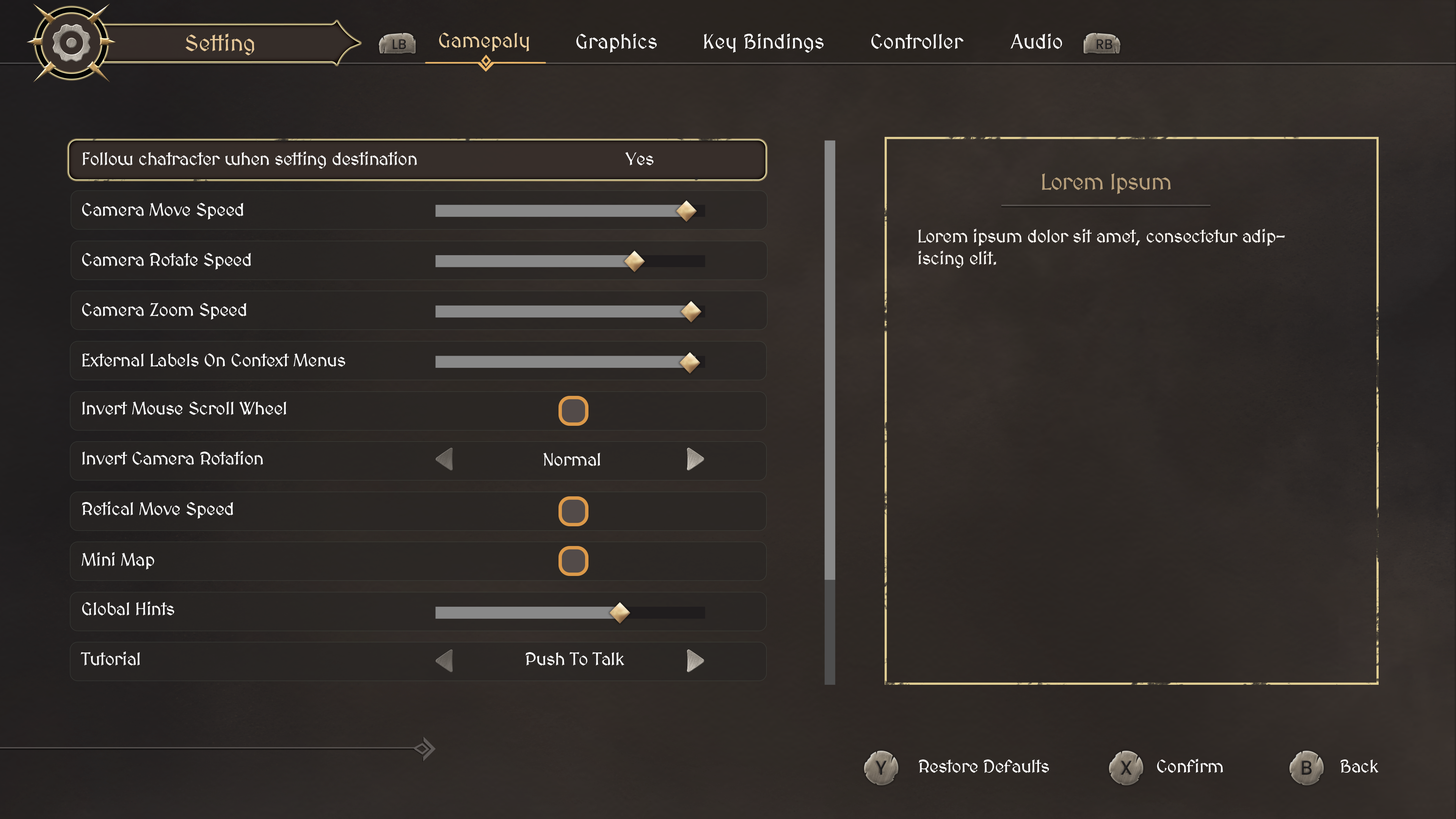
<style>
.page{position:relative;width:1456px;height:819px}
.page>*{position:absolute;margin:0}
.t1{font:22.7px "MedievalSharp";color:#e6c899}
.t2{font:20.5px "MedievalSharp";color:#eccf9f}
.t3{font:20.5px "MedievalSharp";color:#ffffff}
.t4{font:18.2px "MedievalSharp";letter-spacing:-0.02em;color:#ffffff}
.t5{font:22.7px "MedievalSharp";letter-spacing:-0.02em;color:#b79f7b}
.t6{font:18.2px "MedievalSharp";letter-spacing:-0.02em;color:#fffbf5}
</style>
<div class="page">
<p class="t1" style="left:185px;top:33px;width:69px;height:22px">Setting</p>
<p class="t2" style="left:439px;top:33px;width:90px;height:19px">Gamepaly</p>
<p class="t3" style="left:576px;top:33px;width:81px;height:20px">Graphics</p>
<p class="t3" style="left:704px;top:33px;width:120px;height:20px">Key Bindings</p>
<p class="t3" style="left:871px;top:34px;width:93px;height:15px">Controller</p>
<p class="t3" style="left:1010px;top:33px;width:52px;height:16px">Audio</p>
<p class="t4" style="left:83px;top:151px;width:334px;height:18px">Follow chatracter when setting destination</p>
<p class="t4" style="left:625px;top:152px;width:29px;height:13px">Yes</p>
<p class="t5" style="left:1042px;top:173px;width:129px;height:21px">Lorem Ipsum</p>
<p class="t4" style="left:82px;top:203px;width:161px;height:17px">Camera Move Speed</p>
<p class="t6" style="left:918px;top:229px;width:367px;height:39px">Lorem ipsum dolor sit amet, consectetur adipiscing elit.</p>
<p class="t4" style="left:82px;top:253px;width:169px;height:17px">Camera Rotate Speed</p>
<p class="t4" style="left:82px;top:303px;width:164px;height:17px">Camera Zoom Speed</p>
<p class="t4" style="left:82px;top:353px;width:263px;height:14px">External Labels On Context Menus</p>
<p class="t4" style="left:82px;top:402px;width:204px;height:13px">Invert Mouse Scroll Wheel</p>
<p class="t4" style="left:82px;top:451px;width:181px;height:14px">Invert Camera Rotation</p>
<p class="t4" style="left:543px;top:453px;width:57px;height:13px">Normal</p>
<p class="t4" style="left:82px;top:501px;width:151px;height:18px">Retical Move Speed</p>
<p class="t4" style="left:82px;top:552px;width:72px;height:18px">Mini Map</p>
<p class="t4" style="left:82px;top:601px;width:92px;height:14px">Global Hints</p>
<p class="t4" style="left:80px;top:651px;width:60px;height:14px">Tutorial</p>
<p class="t4" style="left:526px;top:652px;width:98px;height:13px">Push To Talk</p>
<p class="t4" style="left:919px;top:759px;width:130px;height:14px">Restore Defaults</p>
<p class="t4" style="left:1157px;top:759px;width:66px;height:14px">Confirm</p>
<p class="t4" style="left:1340px;top:759px;width:39px;height:14px">Back</p>
</div>
